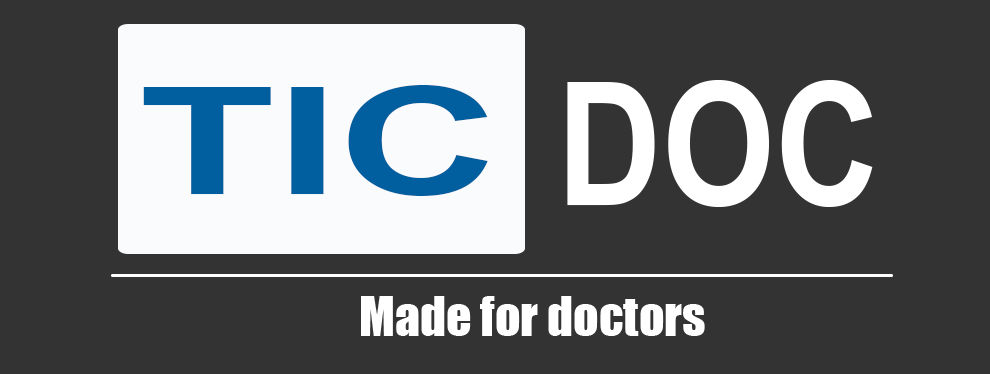
<style>
.page{position:relative;width:990px;height:374px;background:#333333}
.page>*{position:absolute;margin:0}
.t1{font:148.7px "Arial-BoldMT";color:#015e9f;scale:1.5 1}
.t2{font:172.3px "Arial-BoldMT";color:#ffffff;scale:0.84 1}
.t3{font:50px "Impact";color:#ffffff}
</style>
<div class="page">
<p class="t1" style="left:143px;top:85px;width:345px;height:111px">TIC</p>
<p class="t2" style="left:567px;top:80px;width:306px;height:127px">DOC</p>
<p class="t3" style="left:361px;top:296px;width:344px;height:40px">Made for doctors</p>
</div>
